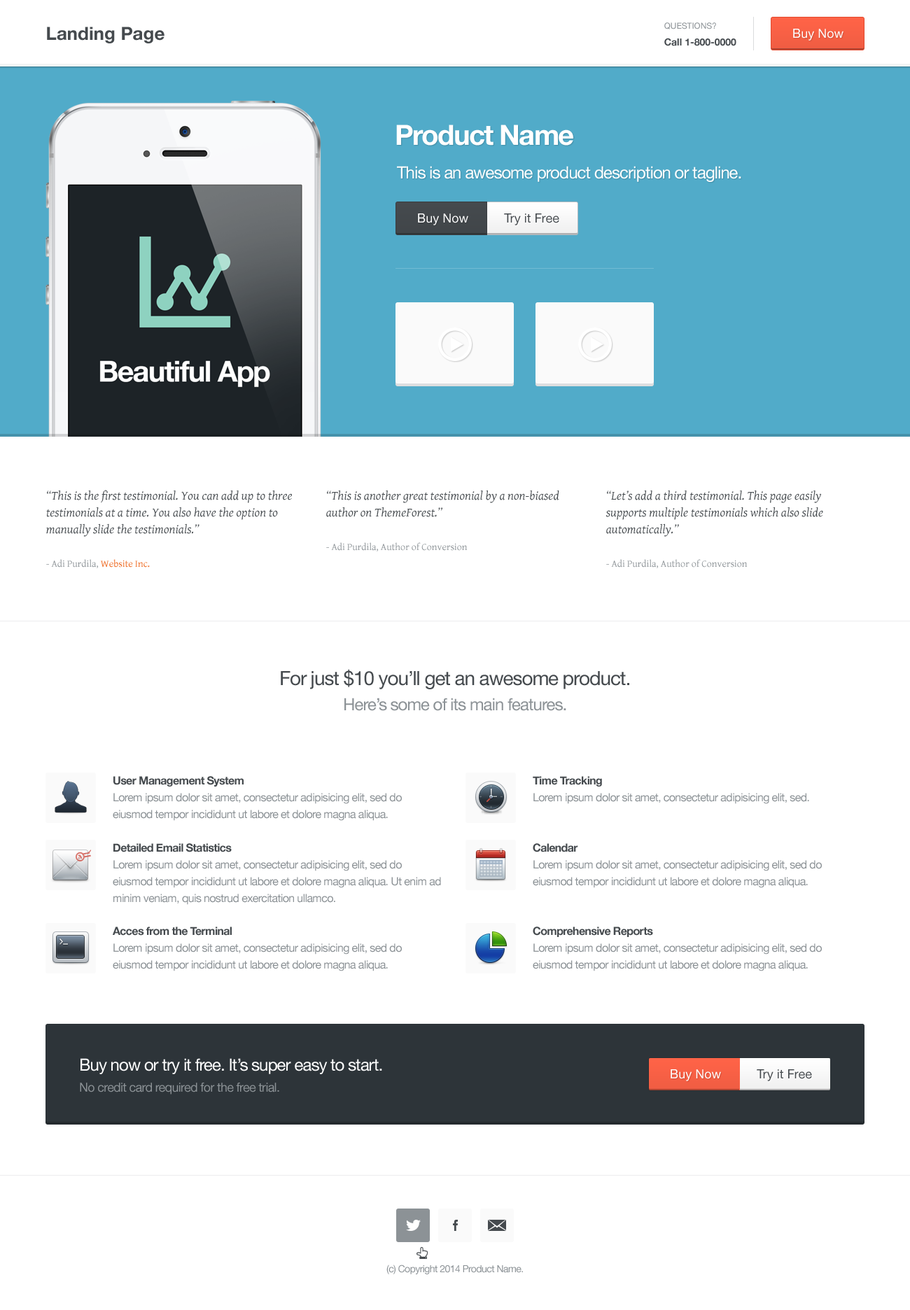
<style>
.page{position:relative;width:910px;height:1310px;background:#ffffff}
.page>*{position:absolute;margin:0}
.t1{font:18.2px "HelveticaNeue-Bold";color:#454a4e}
.t2{font:9.8px/16.8px "HelveticaNeue-Bold";color:#454a4e}
.t3{font:8.4px "MyriadPro-Regular";color:#8c9296}
.t4{font:12.6px "HelveticaNeue";color:#ffffff}
.t5{font:8.4px "MyriadPro-Regular";color:#ffffff}
.t6{font:8.4px "MyriadPro-Regular";color:#454a4e}
.t7{font:12.6px "HelveticaNeue";color:#454a4e}
.t8{font:12.6px/16.8px "GentiumBasic-Italic";color:#454a4e}
.t9{font:9.8px/16.8px "GentiumBasic";color:#8c9296}
.t10{font:9.8px "GentiumBasic";color:#8c9296}
.t11{font:9.8px "GentiumBasic";color:#ee6920}
.t12{font:19.6px "HelveticaNeue";letter-spacing:-0.04em;color:#454a4e}
.t13{font:16.8px "HelveticaNeue";letter-spacing:-0.04em;color:#8c9296}
.t14{font:11.2px/16.8px "HelveticaNeue";letter-spacing:-0.04em;color:#8c9296}
.t15{font:11.2px/16.8px "HelveticaNeue-Bold";letter-spacing:-0.04em;color:#454a4e}
.t16{font:16.8px "HelveticaNeue";letter-spacing:-0.04em;color:#ffffff}
.t17{font:12.6px "HelveticaNeue";letter-spacing:-0.04em;color:#8c9296}
.t18{font:9.8px "MyriadPro-Regular";color:#8c9296}
</style>
<div class="page">
<p class="t1" style="left:47px;top:27px;width:117px;height:16px">Landing Page</p>
<p class="t2" style="left:664px;top:22px;width:72px;height:24px"><span class="t3">Questions?<br></span>Call 1-800-0000</p>
<p class="t4" style="left:793px;top:29px;width:50px;height:12px">Buy Now</p>
<p class="t5" style="left:396px;top:125px;width:177px;height:21px">Product Name</p>
<p class="t5" style="left:397px;top:166px;width:344px;height:16px">This is an awesome product description or tagline.</p>
<p class="t5" style="left:418px;top:213px;width:50px;height:12px">Buy Now</p>
<p class="t6" style="left:504px;top:213px;width:55px;height:12px"><span class="t7">T</span>ry it Fr<span class="t7">ee</span></p>
<p class="t8" style="left:46px;top:490px;width:246px;height:78px">“This is the first testimonial. You can add up to three testimonials at a time. You also have the option to manually slide the testimonials.”<br><br><span class="t9">- Adi Purdila</span><span class="t10">, </span><span class="t11">Website Inc.</span></p>
<p class="t8" style="left:326px;top:490px;width:233px;height:62px">“This is another great testimonial by a non-biased author on ThemeForest.”<br><br><span class="t9">- Adi Purdila, Author of Conversion</span></p>
<p class="t8" style="left:605px;top:490px;width:218px;height:78px">“Let’s add a third testimonial. This page easily supports multiple testimonials which also slide automatically.”<br><br><span class="t9">- Adi Purdila, Author of Conversion</span></p>
<p class="t12" style="left:281px;top:669px;width:348px;height:20px">For just $10 you’ll get an awesome product.</p>
<p class="t13" style="left:344px;top:698px;width:222px;height:13px">Here’s some of its main features.</p>
<p class="t14" style="left:113px;top:776px;width:289px;height:45px"><span class="t15">User Management System<br></span>Lorem ipsum dolor sit amet, consectetur adipisicing elit, sed do eiusmod tempor incididunt ut labore et dolore magna aliqua.</p>
<p class="t14" style="left:533px;top:776px;width:276px;height:28px"><span class="t15">Time Tracking<br></span>Lorem ipsum dolor sit amet, consectetur adipisicing elit, sed.</p>
<p class="t14" style="left:113px;top:843px;width:328px;height:62px"><span class="t15">Detailed Email Statistics<br></span>Lorem ipsum dolor sit amet, consectetur adipisicing elit, sed do eiusmod tempor incididunt ut labore et dolore magna aliqua. Ut enim ad minim veniam, quis nostrud exercitation ullamco.</p>
<p class="t14" style="left:533px;top:843px;width:289px;height:45px"><span class="t15">Calendar<br></span>Lorem ipsum dolor sit amet, consectetur adipisicing elit, sed do eiusmod tempor incididunt ut labore et dolore magna aliqua.</p>
<p class="t14" style="left:113px;top:927px;width:289px;height:45px"><span class="t15">Acces from the Terminal<br></span>Lorem ipsum dolor sit amet, consectetur adipisicing elit, sed do eiusmod tempor incididunt ut labore et dolore magna aliqua.</p>
<p class="t14" style="left:533px;top:927px;width:289px;height:45px"><span class="t15">Comprehensive Reports<br></span>Lorem ipsum dolor sit amet, consectetur adipisicing elit, sed do eiusmod tempor incididunt ut labore et dolore magna aliqua.</p>
<p class="t16" style="left:80px;top:1058px;width:302px;height:16px">Buy now or try it free. It’s super easy to start.</p>
<p class="t5" style="left:671px;top:1070px;width:50px;height:11px">Buy Now</p>
<p class="t6" style="left:757px;top:1070px;width:55px;height:11px"><span class="t7">T</span>ry it Fr<span class="t7">ee</span></p>
<p class="t17" style="left:80px;top:1083px;width:199px;height:12px">No credit card required for the free trial.</p>
<p class="t18" style="left:386px;top:1265px;width:137px;height:10px">(c) Copyright 2014 Product Name.</p>
</div>
